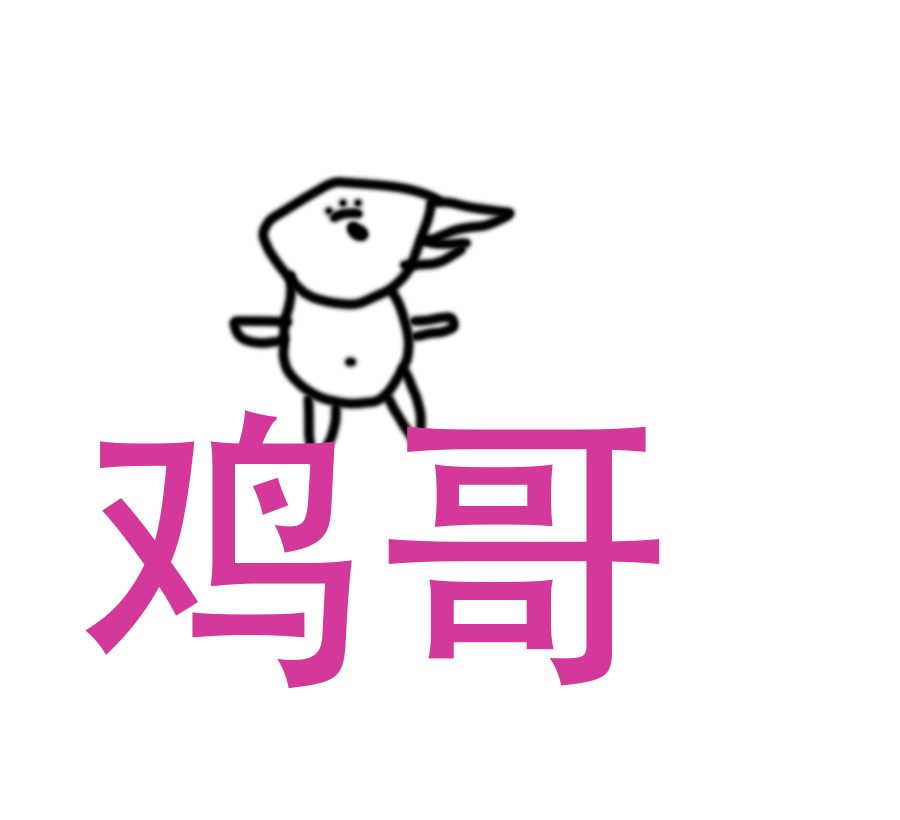
<style>
.page{position:relative;width:900px;height:820px;background:#ffffff}
.page>*{position:absolute;margin:0}
.t1{font:300px "AdobeHeitiStd-Regular";color:#d3389a}
</style>
<div class="page">
<p class="t1" style="left:85px;top:410px;width:575px;height:279px">鸡哥</p>
</div>
